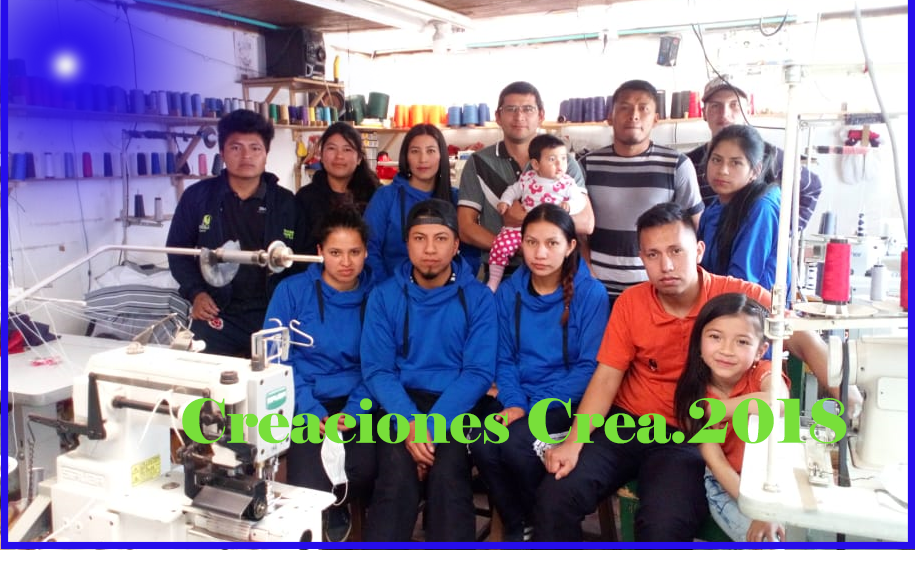
<style>
.page{position:relative;width:915px;height:562px}
.page>*{position:absolute;margin:0}
.t1{font:60px "Elephant-Regular";color:#78df3a}
</style>
<div class="page">
<p class="t1" style="left:182px;top:398px;width:665px;height:46px">Creaciones Crea.2018</p>
</div>
